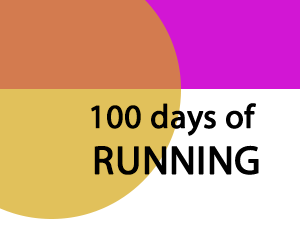
<style>
.page{position:relative;width:300px;height:250px;background:#ffffff}
.page>*{position:absolute;margin:0}
.t1{font:33.3px "MyriadPro-Regular";color:#000000;font-weight:bold}
.t2{font:40px "MyriadPro-Regular";color:#000000;font-weight:bold}
</style>
<div class="page">
<p class="t1" style="left:91px;top:103px;width:165px;height:33px">100 days of</p>
<p class="t2" style="left:94px;top:145px;width:165px;height:30px">RUNNING</p>
</div>
